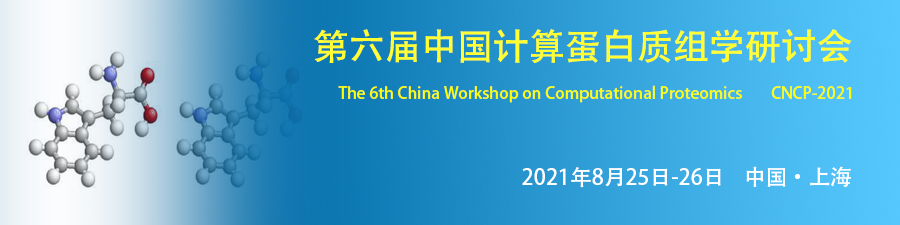
<style>
.page{position:relative;width:900px;height:225px}
.page>*{position:absolute;margin:0}
.t1{font:36px "AdobeHeitiStd-Regular";color:#ffff33}
.t2{font:16.2px "AdobeHeitiStd-Regular";color:#ffff00}
.t3{font:21.6px "AdobeHeitiStd-Regular";color:#ffffff}
</style>
<div class="page">
<p class="t1" style="left:314px;top:29px;width:538px;height:34px">第六届中国计算蛋白质组学研讨会</p>
<p class="t2" style="left:338px;top:85px;width:514px;height:18px">The 6th China Workshop on Computational Proteomics        CNCP-2021</p>
<p class="t3" style="left:522px;top:166px;width:329px;height:22px">2021年8月25日-26日    中国·上海</p>
</div>
